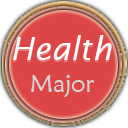
<style>
.page{position:relative;width:128px;height:128px;background:#dd4646}
.page>*{position:absolute;margin:0}
.t1{font:32px "LucidaSans-Italic";color:#ffffff}
.t2{font:32px "LucidaSans-Italic"}
.t3{font:24px "MaiandraGD-Regular";color:#d5d5d5}
</style>
<div class="page">
<p class="t1" style="left:13px;top:35px;width:99px;height:25px">Health</p>
<p class="t2" style="left:13px;top:37px;width:99px;height:25px">Health</p>
<p class="t3" style="left:30px;top:75px;width:64px;height:22px">Major</p>
</div>
